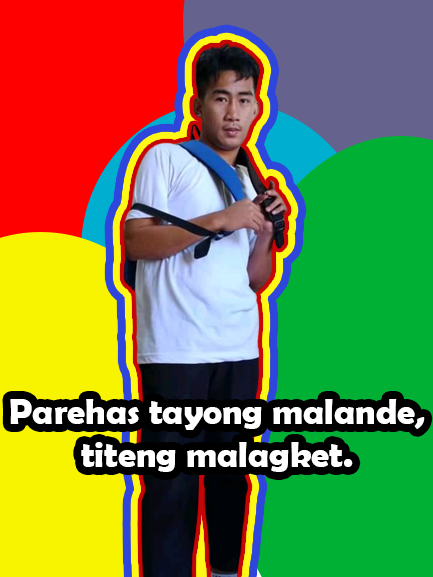
<style>
.page{position:relative;width:433px;height:577px;background:#00b034}
.page>*{position:absolute;margin:0}
.t1{font:36px "BerlinSansFBDemi-Bold";color:#ffffff}
</style>
<div class="page">
<p class="t1" style="left:10px;top:399px;width:415px;height:73px;text-align:center">Parehas tayong malande,<br>titeng malagket.</p>
</div>
